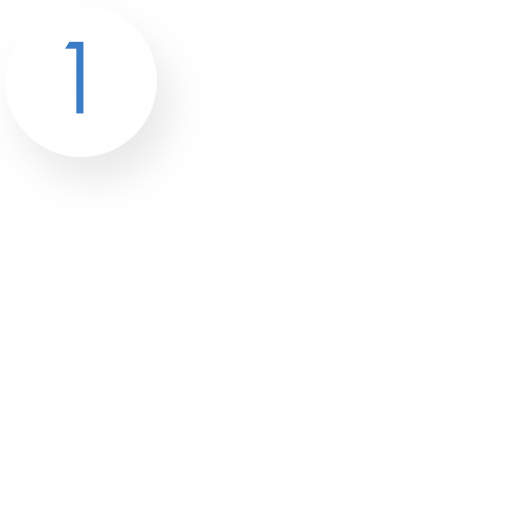
<style>
.page{position:relative;width:512px;height:512px;background:#ffffff}
.page>*{position:absolute;margin:0}
.t1{font:100px "CenturyGothic";color:#397cc8}
</style>
<div class="page">
<p class="t1" style="left:65px;top:41px;width:19px;height:73px">1</p>
</div>
